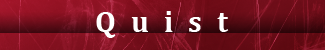
<style>
.page{position:relative;width:325px;height:50px}
.page>*{position:absolute;margin:0}
.t1{font:30px "Cambria-Bold";letter-spacing:0.5em;color:#ffffff}
</style>
<div class="page">
<p class="t1" style="left:96px;top:11px;width:133px;height:27px">Quist</p>
</div>
